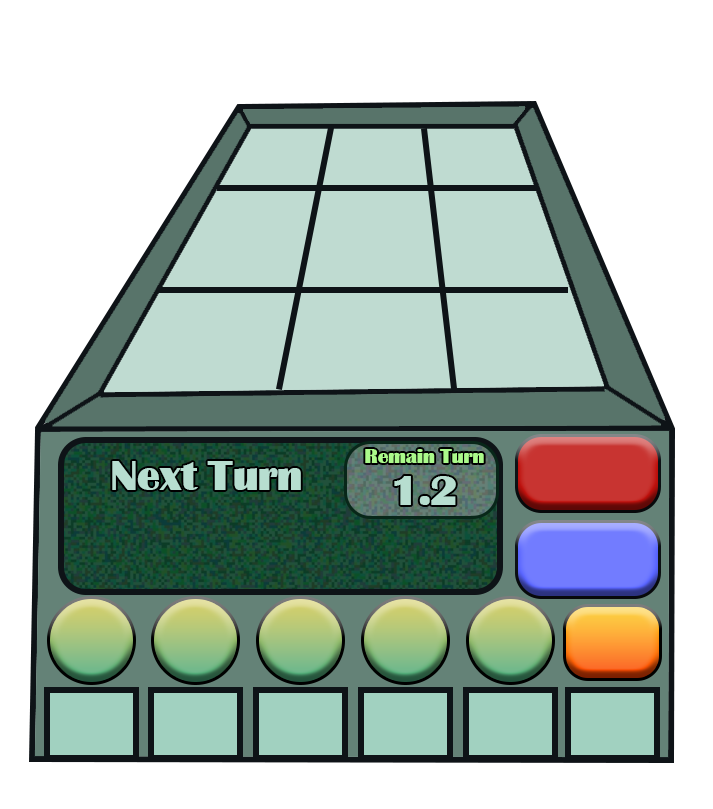
<style>
.page{position:relative;width:713px;height:809px;background:#ffffff}
.page>*{position:absolute;margin:0}
.t1{font:18.7px/24px "Bastion";color:#abfa8b}
.t2{font:40px/24px "Bastion";color:#b7ded0}
.t3{font:40px "Bastion";color:#b7ded0}
</style>
<div class="page">
<p class="t1" style="left:365px;top:449px;width:119px;height:56px;text-align:center">Remain Turn<br><span class="t2">1.2</span></p>
<p class="t3" style="left:112px;top:461px;width:189px;height:29px">Next Turn</p>
</div>
